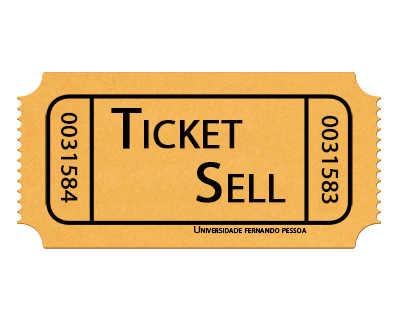
<style>
.page{position:relative;width:400px;height:320px;background:#ffffff}
.page>*{position:absolute;margin:0}
.t1{font:24px "MyriadPro-Regular";color:#030303;font-variant:small-caps;font-weight:bold}
.t2{font:58px "MyriadPro-Regular";color:#030303;font-variant:small-caps;font-weight:bold}
.t3{font:10px "MyriadPro-Regular";color:#030303;font-variant:small-caps;font-weight:bold}
</style>
<div class="page">
<p class="t1" style="left:61px;top:112px;width:17px;height:91px;rotate:90deg">0031584</p>
<p class="t2" style="left:111px;top:108px;width:132px;height:41px">Ticket</p>
<p class="t1" style="left:321px;top:115px;width:18px;height:89px;rotate:90deg">0031583</p>
<p class="t2" style="left:196px;top:162px;width:90px;height:41px">Sell</p>
<p class="t3" style="left:194px;top:226px;width:113px;height:8px">Universidade fernando pessoa</p>
</div>
